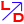
<style>
.page{position:relative;width:24px;height:24px;background:#ffffff}
.page>*{position:absolute;margin:0}
.t1{font:14px "CopperplateGothic-Bold";color:#ff0000}
</style>
<div class="page">
<p class="t1" style="left:1px;top:1px;width:10px;height:9px">L</p>
<p class="t1" style="left:13px;top:13px;width:11px;height:9px">D</p>
</div>
